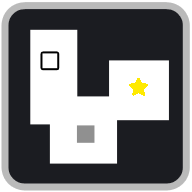
<style>
.page{position:relative;width:192px;height:192px;background:#1b1c21}
.page>*{position:absolute;margin:0}
.t1{font:27.8px "YanoljaYacheB";letter-spacing:0.1em;color:#ffea01}
</style>
<div class="page">
<p class="t1" style="left:129px;top:78px;width:19px;height:18px">★</p>
</div>
